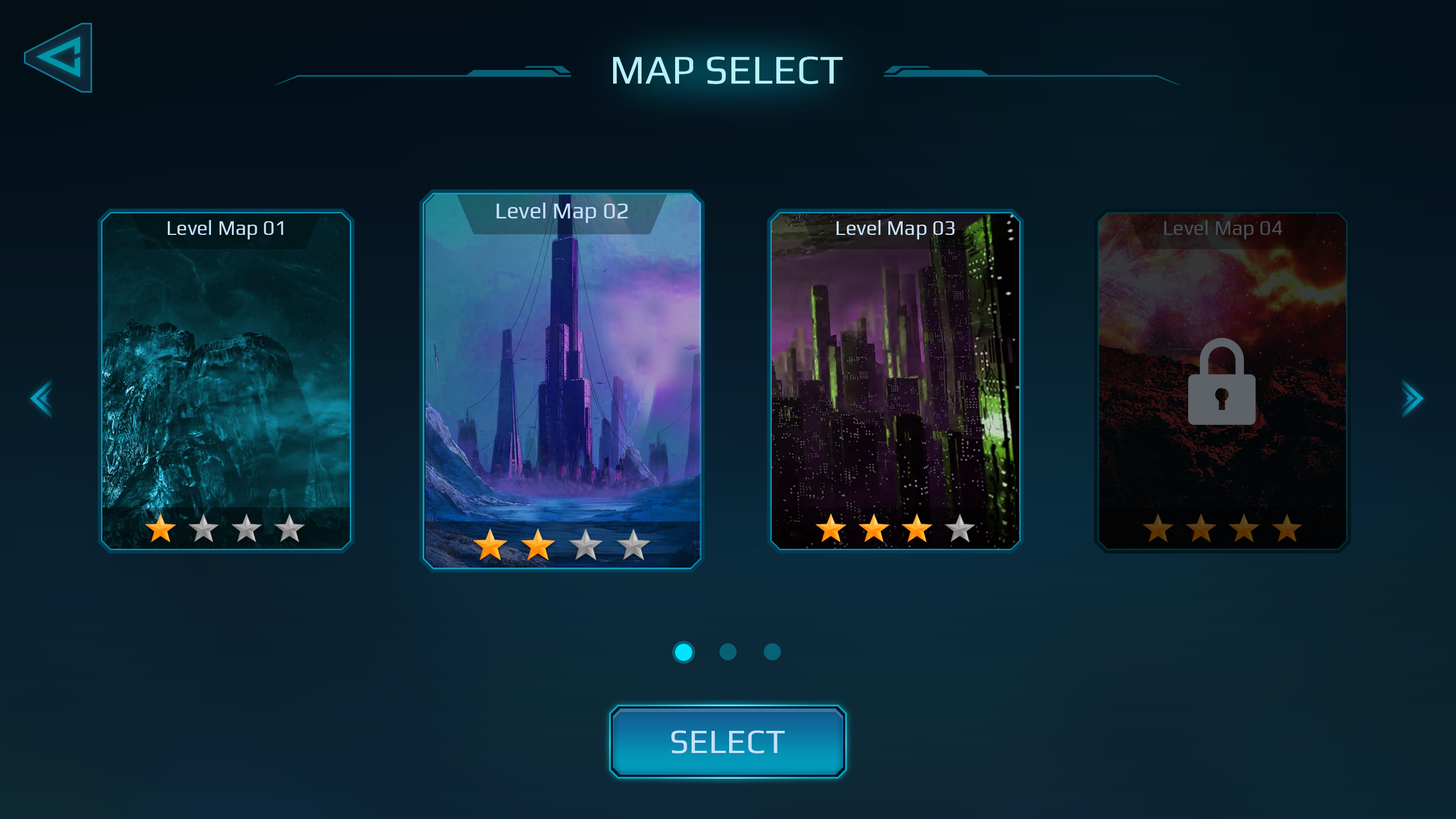
<style>
.page{position:relative;width:1456px;height:819px}
.page>*{position:absolute;margin:0}
.t1{font:40.9px "Play-Regular";color:#b7f1ff}
.t2{font:22.7px "Play-Regular";color:#c6e2ff}
.t3{font:20.5px "Play-Regular";color:#c6e2ff}
.t4{font:20.5px "Play-Regular";color:#454f59}
.t5{font:34.1px "Play-Regular";color:#c6e2ff}
</style>
<div class="page">
<p class="t1" style="left:613px;top:56px;width:230px;height:28px">MAP SELECT</p>
<p class="t2" style="left:497px;top:202px;width:131px;height:21px">Level Map 02</p>
<p class="t3" style="left:168px;top:220px;width:115px;height:19px">Level Map 01</p>
<p class="t3" style="left:837px;top:220px;width:118px;height:19px">Level Map 03</p>
<p class="t4" style="left:1164px;top:220px;width:118px;height:19px">Level Map 04</p>
<p class="t5" style="left:671px;top:730px;width:114px;height:24px">SELECT</p>
</div>
